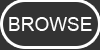
<style>
.page{position:relative;width:100px;height:50px;background:#333333}
.page>*{position:absolute;margin:0}
.t1{font:19px "ArialMT";color:#ffffff}
</style>
<div class="page">
<p class="t1" style="left:9px;top:17px;width:83px;height:14px">BROWSE</p>
</div>
